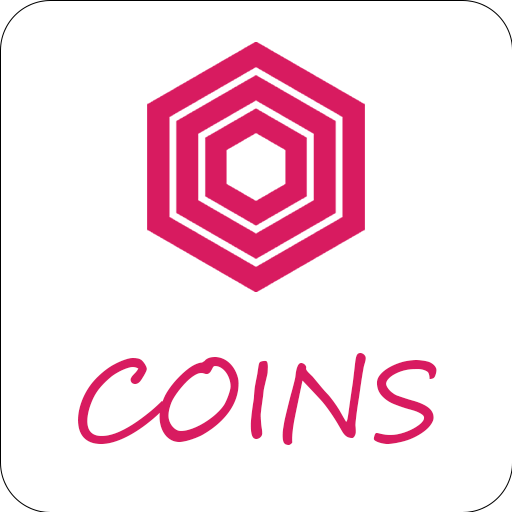
<style>
.page{position:relative;width:512px;height:512px;background:#ffffff}
.page>*{position:absolute;margin:0}
.t1{font:111.1px "SegoeScript";color:#d81b60}
</style>
<div class="page">
<p class="t1" style="left:78px;top:353px;width:359px;height:92px">COINS</p>
</div>
